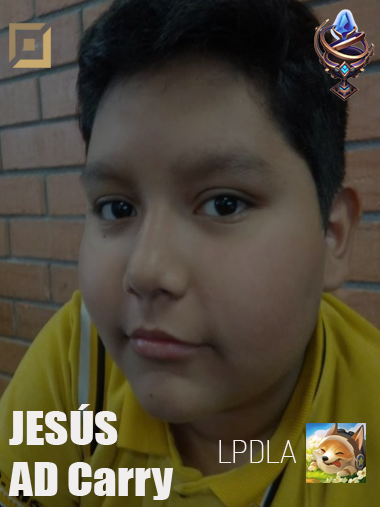
<style>
.page{position:relative;width:380px;height:507px}
.page>*{position:absolute;margin:0}
.t1{font:42.5px "Impact";color:#f1eeee;scale:1.11 1}
.t2{font:32px "Dosis-ExtraLight";color:#f1eeee}
</style>
<div class="page">
<p class="t1" style="left:8px;top:404px;width:165px;height:96px">JESÚS<br>AD Carry</p>
<p class="t2" style="left:219px;top:440px;width:77px;height:23px">LPDLA</p>
</div>
